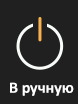
<style>
.page{position:relative;width:78px;height:104px;background:#202020}
.page>*{position:absolute;margin:0}
.t1{font:12px "Calibri-Bold";color:#ffffff}
</style>
<div class="page">
<p class="t1" style="left:10px;top:82px;width:64px;height:14px">В ручную</p>
</div>
